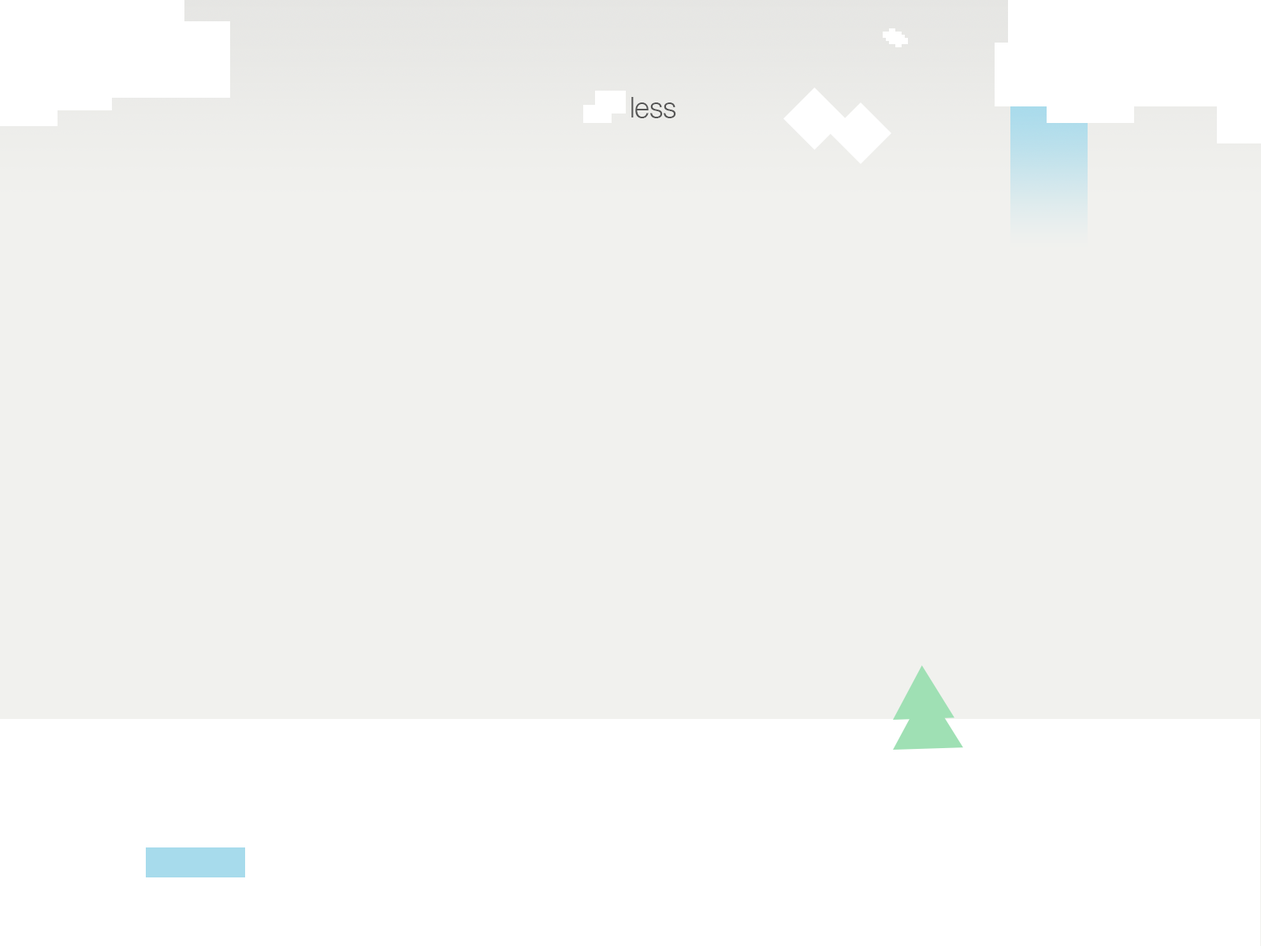
<style>
.page{position:relative;width:1261px;height:946px;background:#f1f1ee}
.page>*{position:absolute;margin:0}
.t1{font:28.4px "HelveticaNeue-Light";color:#555555}
</style>
<div class="page">
<p class="t1" style="left:631px;top:97px;width:45px;height:21px">less</p>
</div>
